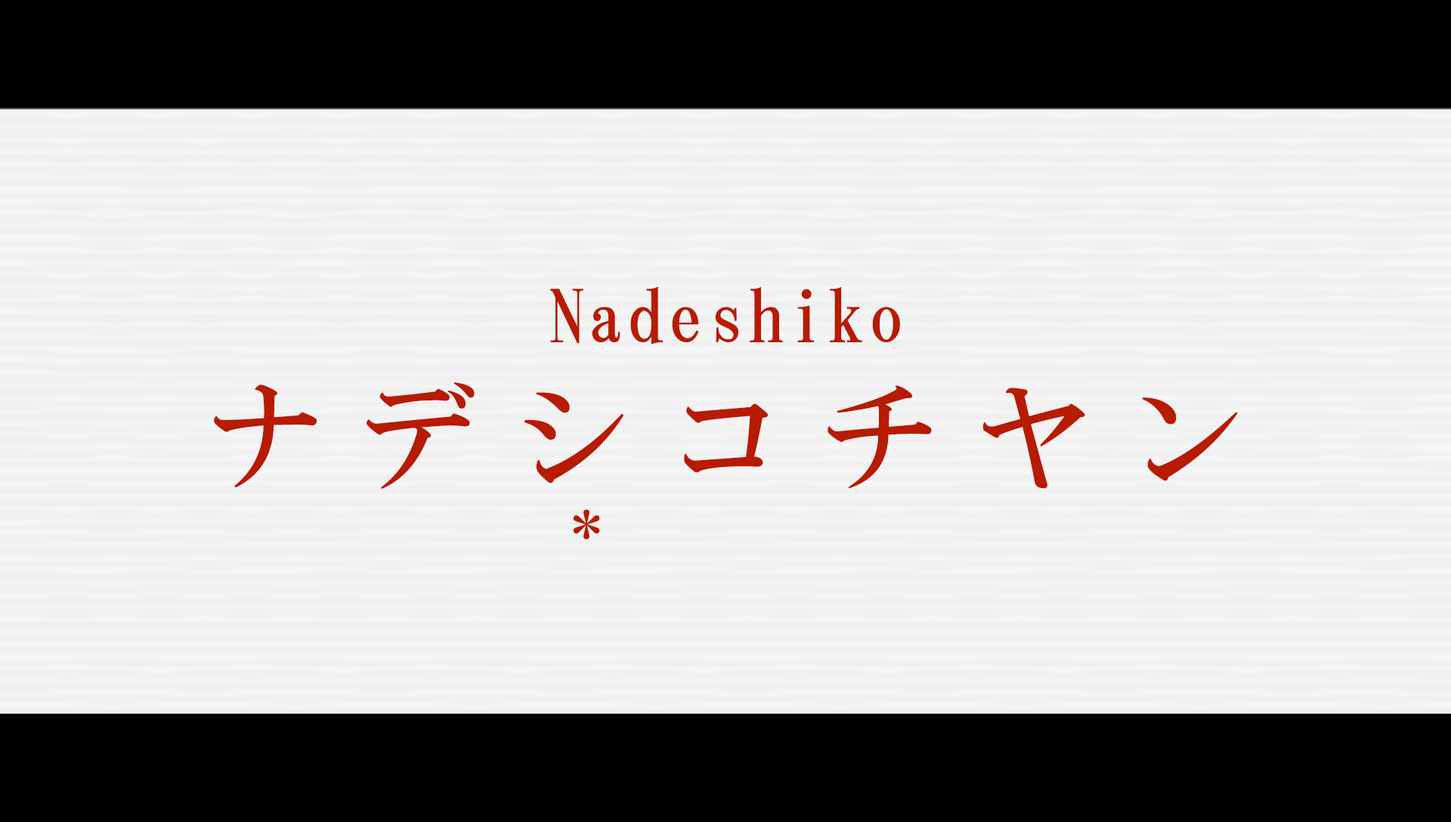
<style>
.page{position:relative;width:1451px;height:822px;background:#f0f0f0}
.page>*{position:absolute;margin:0}
.t1{font:72.5px "HGMinchoB";letter-spacing:0.05em;color:#b71b02}
.t2{font:117.1px "HGMinchoB";letter-spacing:0.31em;color:#b71b02}
.t3{font:58.2px "HGMinchoB";letter-spacing:0.31em;color:#b71b02}
</style>
<div class="page">
<p class="t1" style="left:550px;top:286px;width:350px;height:59px">Nadeshiko</p>
<p class="t2" style="left:214px;top:382px;width:1024px;height:107px">ナデシコチヤン</p>
<p class="t3" style="left:573px;top:509px;width:27px;height:30px">*</p>
</div>
